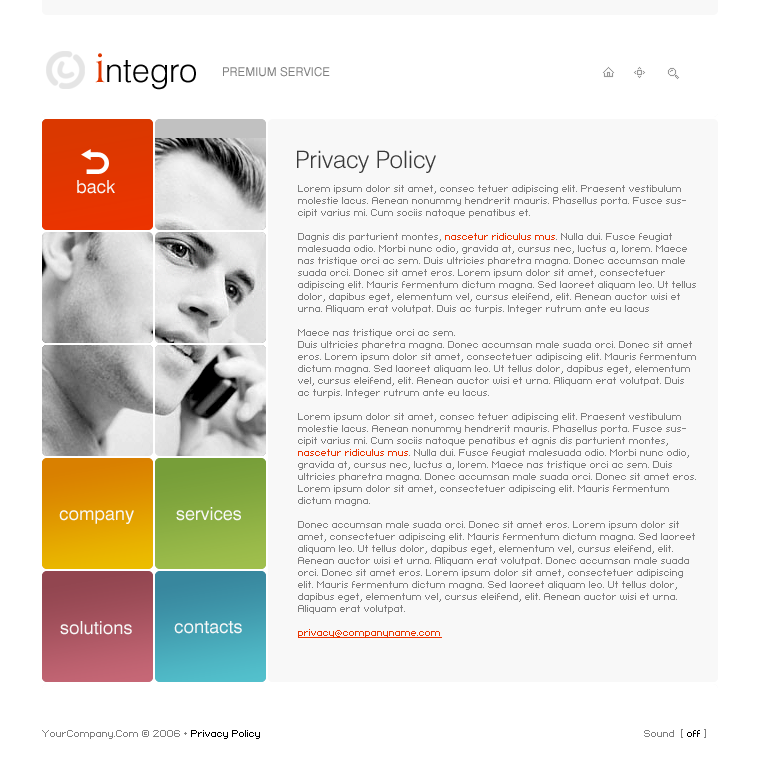
<style>
.page{position:relative;width:766px;height:780px;background:#f8f8f8}
.page>*{position:absolute;margin:0}
.t1{font:33px "Swiss721BT-Light";color:#000000}
.t2{font:41.2px "AmericanaBT-Roman";color:#de3700}
.t3{font:12px "Swiss721BT-Roman";color:#7f7f7f;text-transform:uppercase}
.t4{font:24px "Swiss721BT-Light";color:#393939}
.t5{font:18px "Swiss721BT-Roman";color:#f8f8f8}
.t6{font:8px/12px "Standard0753";color:#7f7f7f}
.t7{font:8px/12px "Standard0753";color:#e93400}
.t8{font:8px/12px "Standard0753";color:#e93400;text-decoration:underline}
.t9{font:8px "Standard0753";color:#7f7f7f}
.t10{font:8px "Standard0753";color:#000000}
</style>
<div class="page">
<p class="t1" style="left:95px;top:53px;width:101px;height:37px"><span class="t2">i</span>ntegro</p>
<p class="t3" style="left:223px;top:67px;width:107px;height:10px">premium service</p>
<p class="t4" style="left:297px;top:150px;width:139px;height:23px">Privacy Policy</p>
<p class="t5" style="left:77px;top:180px;width:38px;height:14px">back</p>
<p class="t6" style="left:298px;top:185px;width:398px;height:453px">Lorem ipsum dolor sit amet, consec tetuer adipiscing elit. Praesent vestibulum molestie lacus. Aenean nonummy hendrerit mauris. Phasellus porta. Fusce suscipit varius mi. Cum sociis natoque penatibus et. <br><br>Dagnis dis parturient montes, <span class="t7">nascetur ridiculus mus</span>. Nulla dui. Fusce feugiat malesuada odio. Morbi nunc odio, gravida at, cursus nec, luctus a, lorem. Maece nas tristique orci ac sem. Duis ultricies pharetra magna. Donec accumsan male suada orci. Donec sit amet eros. Lorem ipsum dolor sit amet, consectetuer adipiscing elit. Mauris fermentum dictum magna. Sed laoreet aliquam leo. Ut tellus dolor, dapibus eget, elementum vel, cursus eleifend, elit. Aenean auctor wisi et urna. Aliquam erat volutpat. Duis ac turpis. Integer rutrum ante eu lacus<br><br>Maece nas tristique orci ac sem. <br>Duis ultricies pharetra magna. Donec accumsan male suada orci. Donec sit amet eros. Lorem ipsum dolor sit amet, consectetuer adipiscing elit. Mauris fermentum dictum magna. Sed laoreet aliquam leo. Ut tellus dolor, dapibus eget, elementum vel, cursus eleifend, elit. Aenean auctor wisi et urna. Aliquam erat volutpat. Duis ac turpis. Integer rutrum ante eu lacus.<br><br>Lorem ipsum dolor sit amet, consec tetuer adipiscing elit. Praesent vestibulum molestie lacus. Aenean nonummy hendrerit mauris. Phasellus porta. Fusce suscipit varius mi. Cum sociis natoque penatibus et agnis dis parturient montes, <span class="t7">nascetur ridiculus mus</span>. Nulla dui. Fusce feugiat malesuada odio. Morbi nunc odio, gravida at, cursus nec, luctus a, lorem. Maece nas tristique orci ac sem. Duis ultricies pharetra magna. Donec accumsan male suada orci. Donec sit amet eros. Lorem ipsum dolor sit amet, consectetuer adipiscing elit. Mauris fermentum dictum magna. <br><br>Donec accumsan male suada orci. Donec sit amet eros. Lorem ipsum dolor sit amet, consectetuer adipiscing elit. Mauris fermentum dictum magna. Sed laoreet aliquam leo. Ut tellus dolor, dapibus eget, elementum vel, cursus eleifend, elit. Aenean auctor wisi et urna. Aliquam erat volutpat. Donec accumsan male suada orci. Donec sit amet eros. Lorem ipsum dolor sit amet, consectetuer adipiscing elit. Mauris fermentum dictum magna. Sed laoreet aliquam leo. Ut tellus dolor, dapibus eget, elementum vel, cursus eleifend, elit. Aenean auctor wisi et urna. Aliquam erat volutpat. <br><br><span class="t8">privacy@companyname.com</span></p>
<p class="t5" style="left:59px;top:510px;width:75px;height:14px">company</p>
<p class="t5" style="left:176px;top:507px;width:65px;height:14px">services</p>
<p class="t5" style="left:60px;top:621px;width:72px;height:14px">solutions</p>
<p class="t5" style="left:174px;top:621px;width:68px;height:13px">contacts</p>
<p class="t9" style="left:42px;top:730px;width:218px;height:9px">YourCompany.Com © 2006 •<span class="t10"> Privacy Policy</span></p>
<p class="t9" style="left:644px;top:729px;width:62px;height:9px">Sound  [ <span class="t10">off</span> ]</p>
</div>
